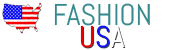
<style>
.page{position:relative;width:174px;height:50px;background:#ffffff}
.page>*{position:absolute;margin:0}
.t1{font:30px "Abel-Regular";color:#37898e}
.t2{font:30px "Abel-Regular";color:#e70000}
.t3{font:30px "Abel-Regular";color:#0b12f8}
.t4{font:30px "Abel-Regular";color:#ffffff}
</style>
<div class="page">
<p class="t1" style="left:54px;top:3px;width:96px;height:23px">FASHION</p>
<p class="t2" style="left:80px;top:25px;width:45px;height:23px">U<span class="t3">S</span><span class="t4">A</span></p>
</div>
